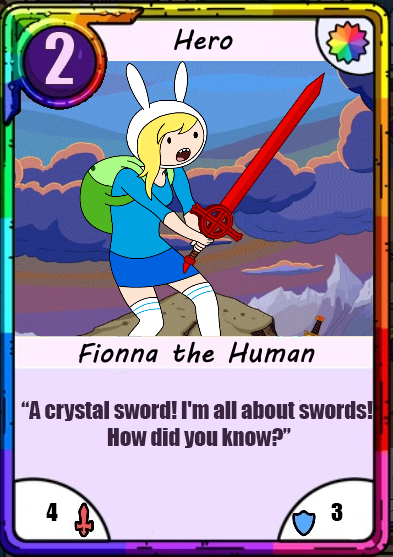
<style>
.page{position:relative;width:393px;height:557px}
.page>*{position:absolute;margin:0}
.t1{font:66.7px "Impact";color:#f8d4fa}
.t2{font:22.7px "Impact";color:#3b2440}
.t3{font:22.7px "Impact";color:#000000}
</style>
<div class="page">
<p class="t1" style="left:44px;top:31px;width:31px;height:54px">2</p>
<p class="t2" style="left:21px;top:401px;width:352px;height:47px;text-align:center">“A crystal sword! I'm all about swords! <br>How did you know?”</p>
<p class="t3" style="left:46px;top:503px;width:12px;height:18px">4</p>
<p class="t3" style="left:331px;top:503px;width:12px;height:18px">3</p>
</div>
